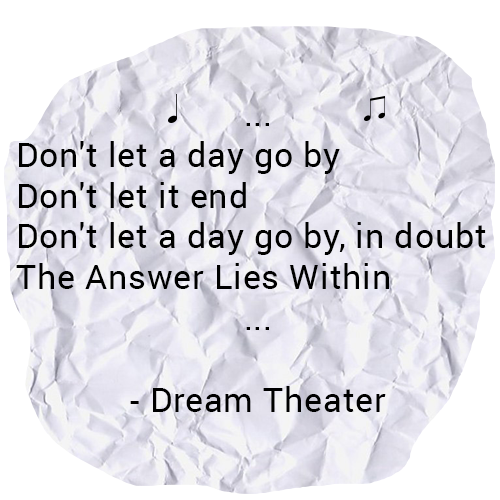
<style>
.page{position:relative;width:500px;height:500px;background:#ffffff}
.page>*{position:absolute;margin:0}
.t1{font:34px "Roboto-Regular";letter-spacing:0.025em;color:#000000}
</style>
<div class="page">
<p class="t1" style="left:16px;top:123px;width:470px;height:289px;text-align:center">...<br>Don't let a day go by<br>Don't let it end<br>Don't let a day go by, in doubt<br>The Answer Lies Within<br>...<br><br>- Dream Theater</p>
</div>
